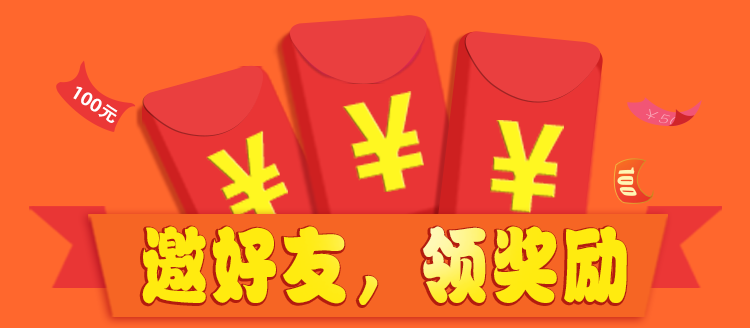
<style>
.page{position:relative;width:750px;height:328px;background:#ff672d}
.page>*{position:absolute;margin:0}
.t1{font:16.8px "AdobeHeitiStd-Regular";color:#ffffff;font-weight:bold;scale:1.12 1}
.t2{font:133.4px "FZDHTJW--GB1-0";color:#fff721}
.t3{font:129.2px "FZDHTJW--GB1-0";color:#fff721}
.t4{font:119.2px "FZDHTJW--GB1-0";color:#fff721}
.t5{font:82.2px "FZPWK--GBK1-0";letter-spacing:0.051em;color:#ffeb0f;scale:0.81 1}
</style>
<div class="page">
<p class="t1" style="left:73px;top:86px;width:45px;height:37px;rotate:33deg">100元</p>
<p class="t2" style="left:342px;top:91px;width:82px;height:101px;rotate:-13deg">￥</p>
<p class="t3" style="left:490px;top:120px;width:74px;height:94px;rotate:6deg">￥</p>
<p class="t4" style="left:206px;top:130px;width:82px;height:94px;rotate:-25deg">￥</p>
<p class="t5" style="left:142px;top:226px;width:485px;height:79px">邀好友，领奖励</p>
</div>
